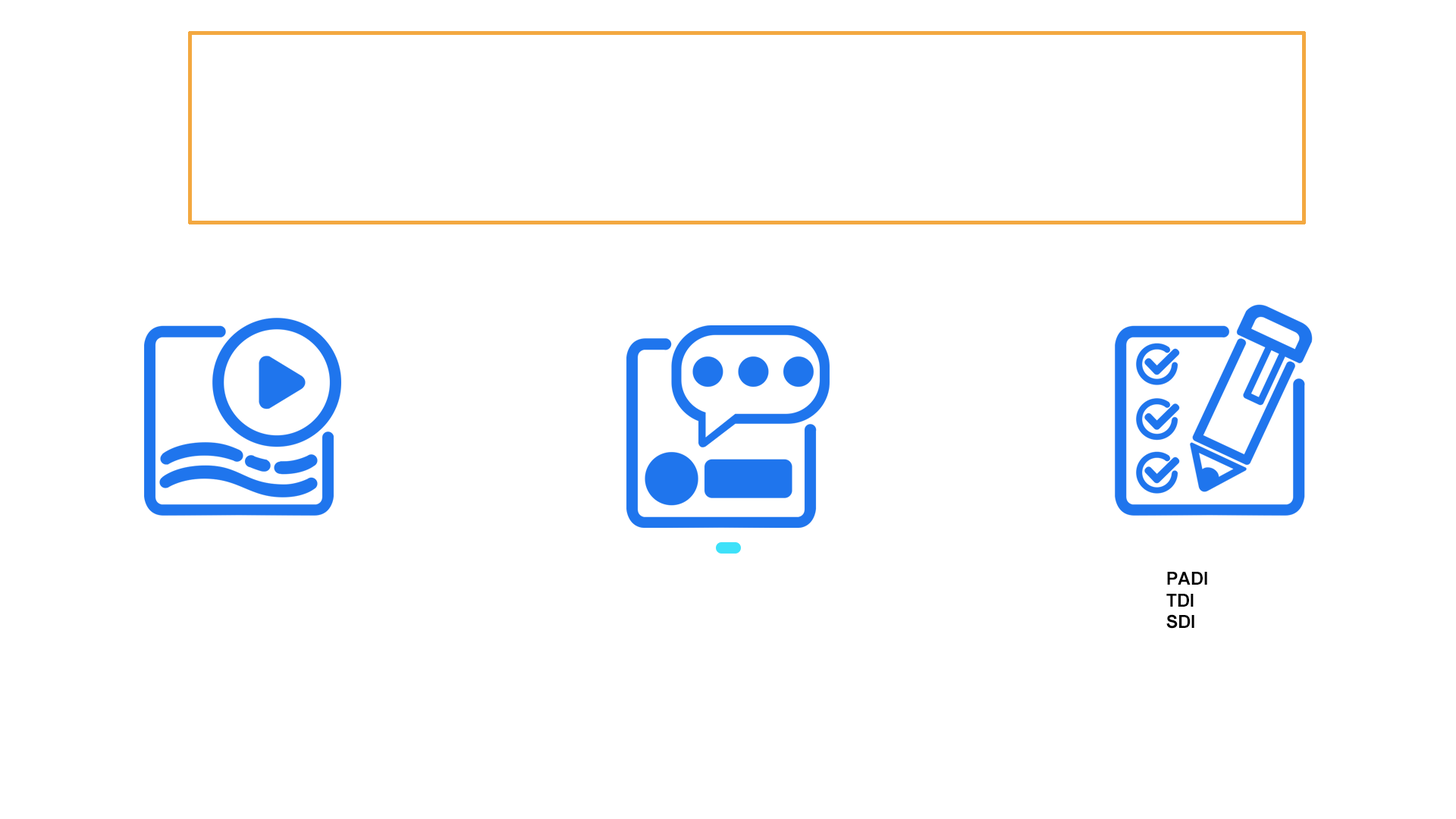
<style>
.page{position:relative;width:1456px;height:819px;background:#ffffff}
.page>*{position:absolute;margin:0}
.t1{font:17.9px "Arial-BoldMT";letter-spacing:-0.01em;color:#000000;text-transform:uppercase}
</style>
<div class="page">
<p class="t1" style="left:1166px;top:572px;width:41px;height:57px">PADI<br>TDI<br>SDI</p>
</div>
